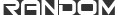
<style>
.page{position:relative;width:118px;height:15px;background:#ffffff}
.page>*{position:absolute;margin:0}
.t1{font:30px "Bitsumishi";color:#ffffff}
</style>
<div class="page">
<p class="t1" style="left:0px;top:0px;width:119px;height:15px">random</p>
</div>
